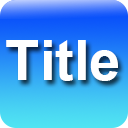
<style>
.page{position:relative;width:128px;height:128px}
.page>*{position:absolute;margin:0}
.t1{font:56px "Arial-BoldMT";color:#ffffff}
</style>
<div class="page">
<p class="t1" style="left:6px;top:40px;width:112px;height:41px">Title</p>
</div>
